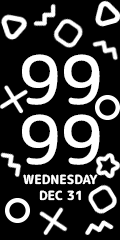
<style>
.page{position:relative;width:120px;height:240px;background:#000000}
.page>*{position:absolute;margin:0}
.t1{font:66.7px "RoundedMplus1c-Medium";color:#ffffff}
.t2{font:12.5px "RoundedMplus1c-ExtraBold";color:#ffffff}
</style>
<div class="page">
<p class="t1" style="left:22px;top:54px;width:78px;height:51px">99</p>
<p class="t1" style="left:22px;top:114px;width:78px;height:51px">99</p>
<p class="t2" style="left:23px;top:174px;width:75px;height:11px">WEDNESDAY</p>
<p class="t2" style="left:39px;top:190px;width:42px;height:11px">DEC 31</p>
</div>
